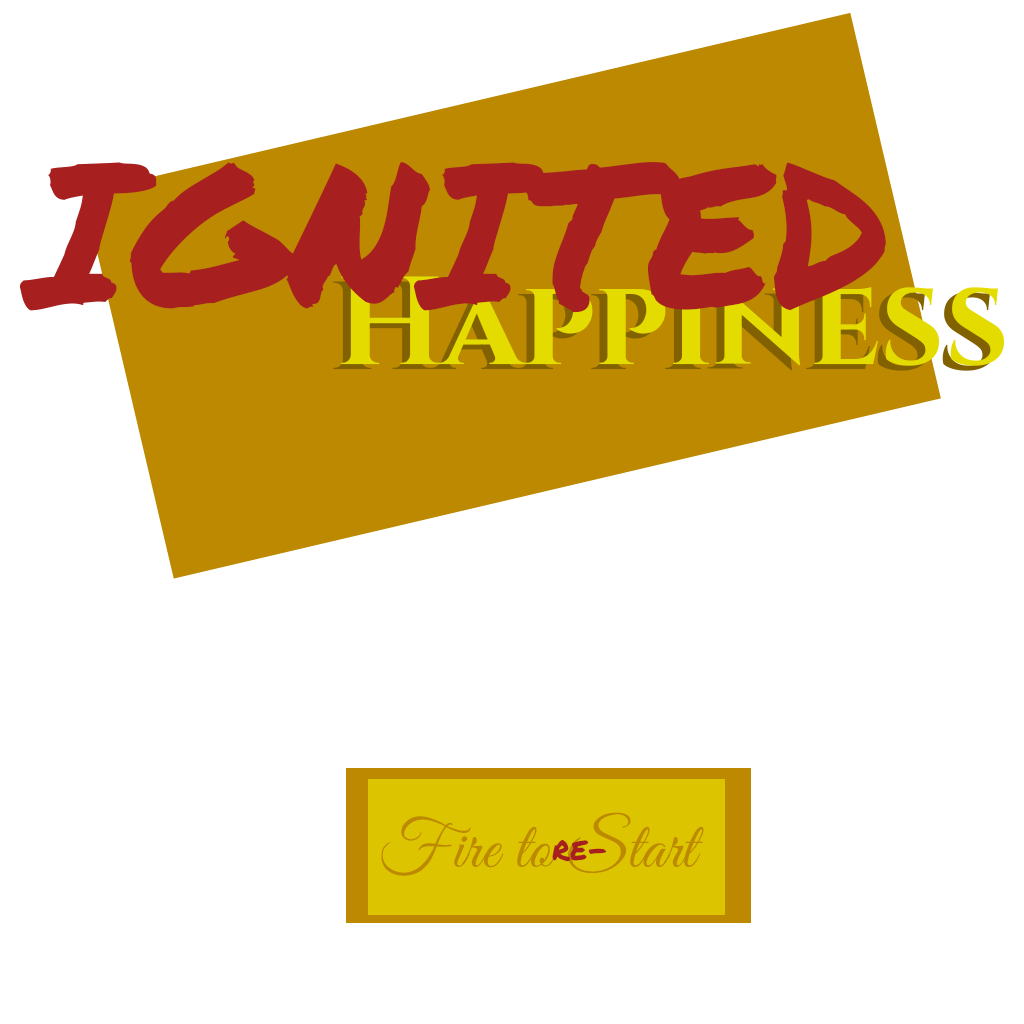
<style>
.page{position:relative;width:1024px;height:1024px;background:#ffffff}
.page>*{position:absolute;margin:0}
.t1{font:200px "PermanentMarker-Regular";color:#a81f1f}
.t2{font:125px "Cinzel-Bold";color:#e4dc00}
.t3{font:33.3px "PermanentMarker-Regular";color:#a81f1f}
</style>
<div class="page">
<p class="t1" style="left:19px;top:162px;width:867px;height:151px">IGNITED</p>
<p class="t2" style="left:341px;top:276px;width:663px;height:90px">Happiness</p>
<p class="t3" style="left:552px;top:839px;width:54px;height:23px">re-</p>
</div>
